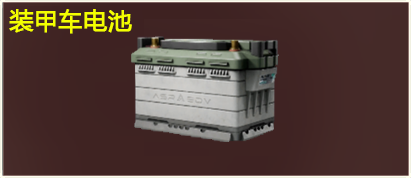
<style>
.page{position:relative;width:411px;height:178px}
.page>*{position:absolute;margin:0}
.t1{font:24px "MicrosoftYaHeiUI";color:#f4ff00;font-weight:bold}
</style>
<div class="page">
<p class="t1" style="left:9px;top:9px;width:123px;height:25px">装甲车电池</p>
</div>
